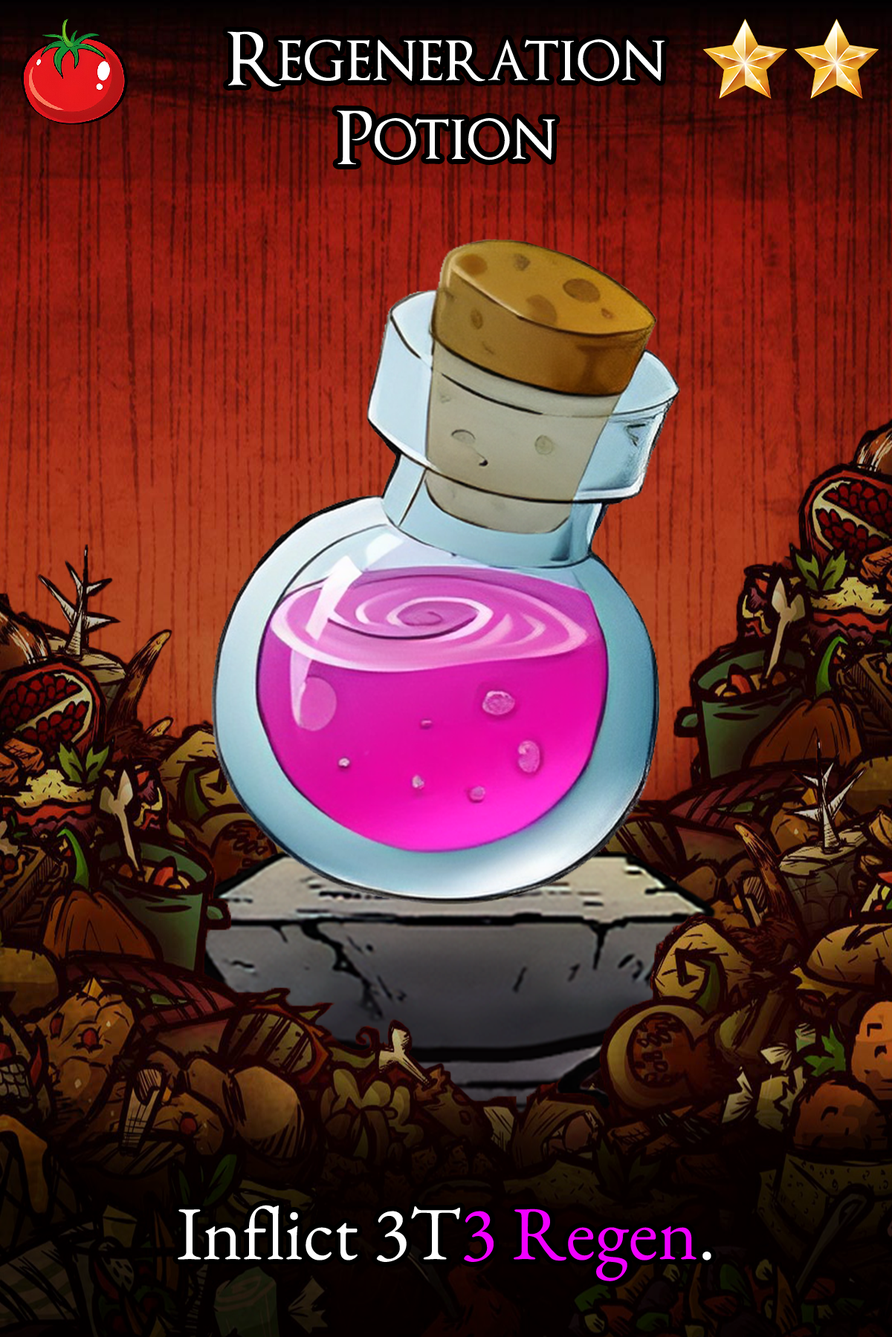
<style>
.page{position:relative;width:892px;height:1337px}
.page>*{position:absolute;margin:0}
.t1{font:123.3px/78.8px "OptimusPrinceps";color:#ffffff}
.t2{font:130px "EBGaramond-Regular";color:#ffffff}
.t3{font:130px "EBGaramond-Regular";color:#f000ff}
</style>
<div class="page">
<p class="t1" style="left:227px;top:31px;width:437px;height:133px;text-align:center">Regeneration<br>Potion</p>
<p class="t2" style="left:178px;top:1205px;width:533px;height:77px">Inflict 3T<span class="t3">3 Regen</span>.</p>
</div>
